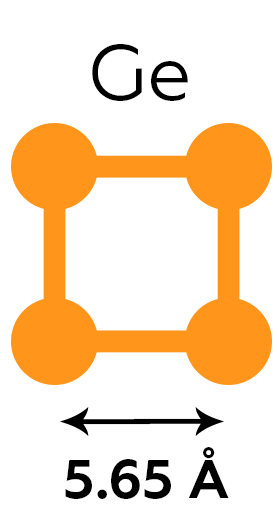
<style>
.page{position:relative;width:279px;height:522px;background:#ffffff}
.page>*{position:absolute;margin:0}
.t1{font:78px "Geometria";color:#000000}
.t2{font:54px "Geometria-Bold";color:#000000}
</style>
<div class="page">
<p class="t1" style="left:92px;top:44px;width:96px;height:57px">Ge</p>
<p class="t2" style="left:65px;top:447px;width:164px;height:52px">5.65 Å</p>
</div>
